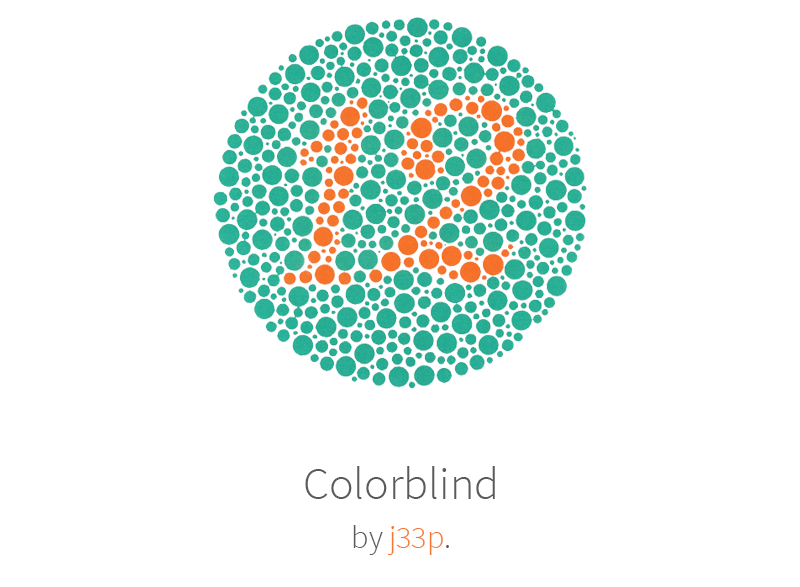
<style>
.page{position:relative;width:800px;height:587px;background:#ffffff}
.page>*{position:absolute;margin:0}
.t1{font:46px/49px "SourceSansPro-Light";color:#5a5a5a}
.t2{font:32px/49px "SourceSansPro-Light";color:#5a5a5a}
.t3{font:32px/49px "SourceSansPro-Light";color:#f57731}
</style>
<div class="page">
<p class="t1" style="left:305px;top:466px;width:190px;height:89px;text-align:center">Colorblind<br><span class="t2">by</span><span class="t3"> j33p</span><span class="t2">.</span></p>
</div>
